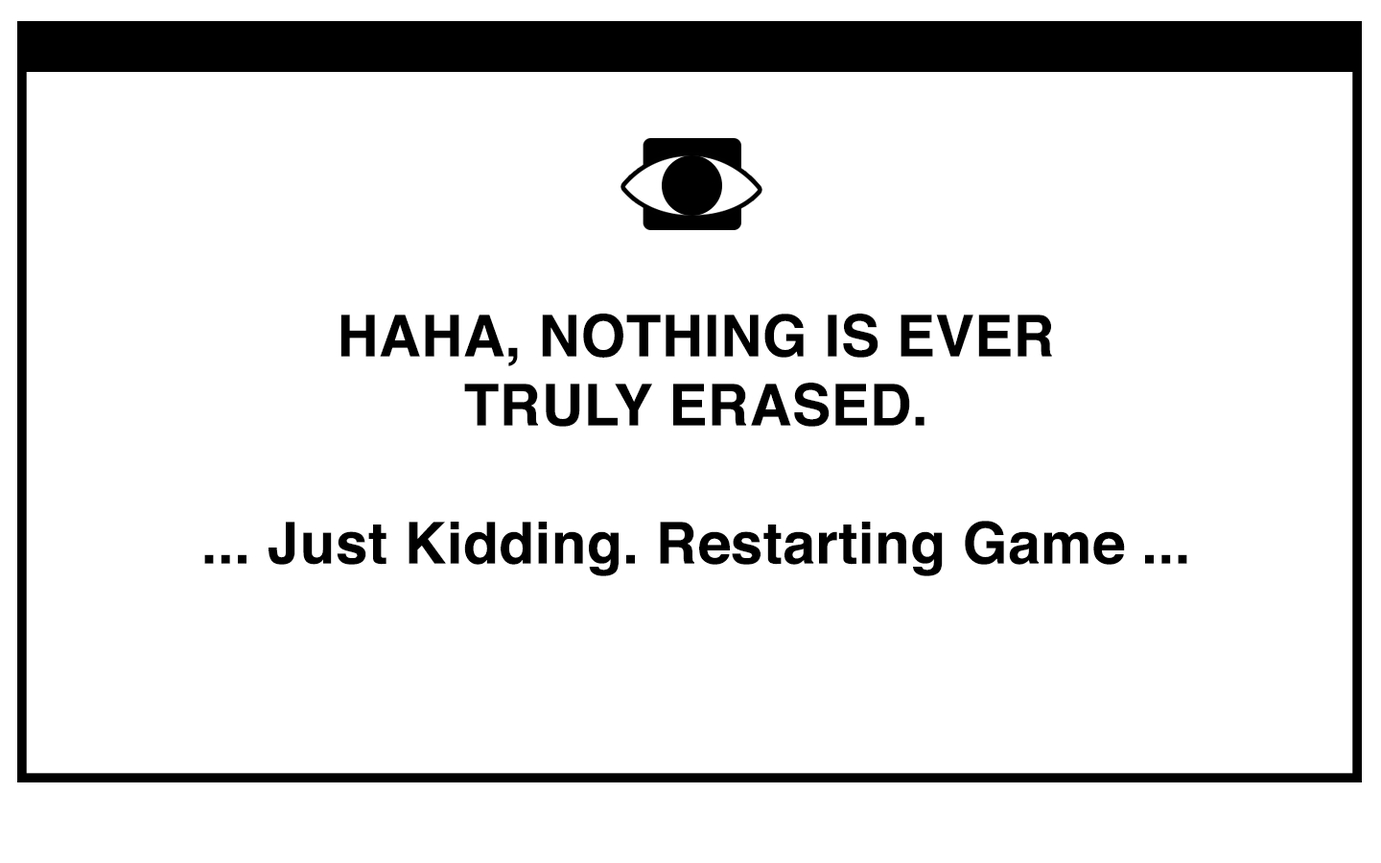
<style>
.page{position:relative;width:1381px;height:863px;background:#ffffff}
.page>*{position:absolute;margin:0}
.t1{font:57.6px "Helvetica-Bold";letter-spacing:0.01em;color:#000000}
</style>
<div class="page">
<p class="t1" style="left:204px;top:314px;width:984px;height:262px;text-align:center">HAHA, NOTHING IS EVER <br>TRULY ERASED.<br><br>... Just Kidding. Restarting Game ...</p>
</div>
